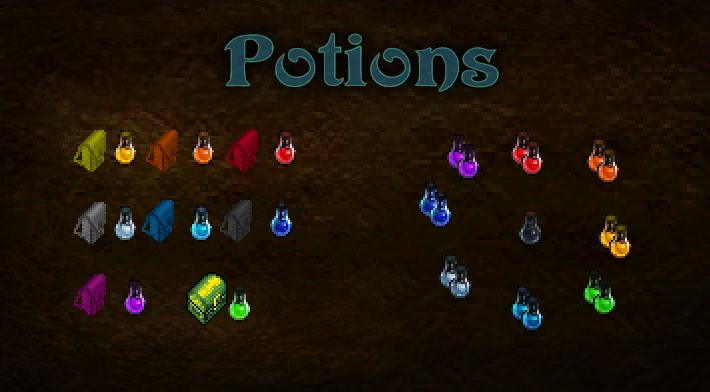
<style>
.page{position:relative;width:710px;height:392px}
.page>*{position:absolute;margin:0}
.t1{font:71.9px "Avatar";color:#1f444e;scale:1.25 1}
</style>
<div class="page">
<p class="t1" style="left:224px;top:33px;width:275px;height:59px">Potions</p>
<p class="t1" style="left:224px;top:33px;width:275px;height:59px">Potions</p>
</div>
